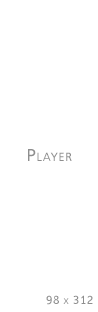
<style>
.page{position:relative;width:98px;height:312px;background:#ffffff}
.page>*{position:absolute;margin:0}
.t1{font:16.9px "Aan55";letter-spacing:0.065em;color:#8e8e8e;font-variant:small-caps;scale:0.92 1}
.t2{font:11.8px "Aan55";letter-spacing:0.065em;color:#8e8e8e;font-variant:small-caps;scale:0.93 1}
</style>
<div class="page">
<p class="t1" style="left:28px;top:149px;width:44px;height:12px">Player</p>
<p class="t2" style="left:46px;top:295px;width:47px;height:10px">98 x 312</p>
</div>
